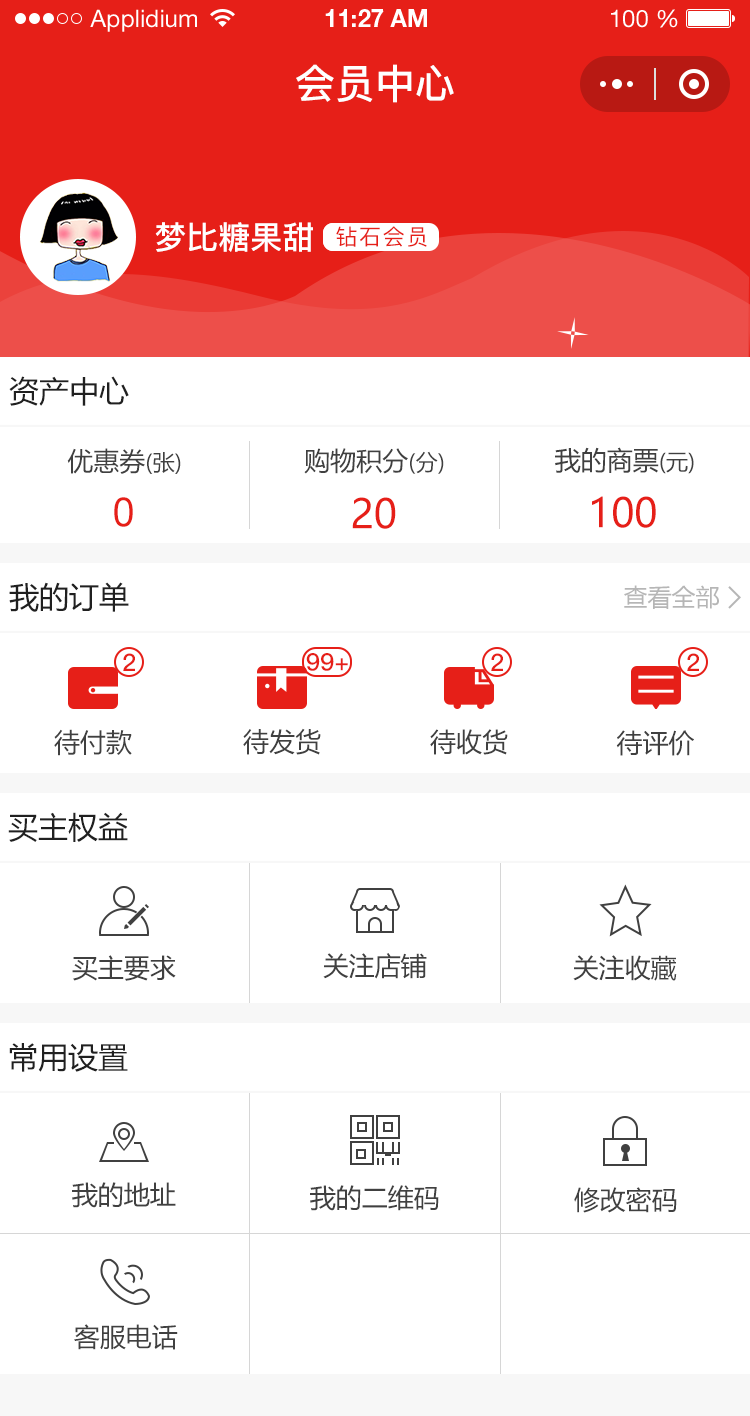
<style>
.page{position:relative;width:750px;height:1416px;background:#ffffff}
.page>*{position:absolute;margin:0}
.t1{font:24px "HelveticaNeueLTStd-Roman";color:#ffffff}
.t2{font:24px "HelveticaNeueLTStd-Bd";color:#ffffff}
.t3{font:40px "PingFang-SC-Bold";color:#ffffff;text-transform:uppercase}
.t4{font:32px "PingFang-SC-Bold";color:#ffffff;text-transform:uppercase}
.t5{font:22px "PingFang-SC-Medium";letter-spacing:0.08em;color:#e61f18}
.t6{font:30px "MicrosoftYaHei";color:#202020;text-transform:uppercase}
.t7{font:26px "MicrosoftYaHei";color:#404040;text-transform:uppercase}
.t8{font:22px "MicrosoftYaHei";color:#404040;text-transform:uppercase}
.t9{font:40px "ArialMT";color:#e61f18;text-transform:uppercase}
.t10{font:40px "MicrosoftYaHei";color:#e61f18;text-transform:uppercase}
.t11{font:24px "MicrosoftYaHei";color:#b6b6b6;text-transform:uppercase}
.t12{font:24px "PingFang-SC-Bold";color:#e61f18;text-transform:uppercase}
</style>
<div class="page">
<p class="t1" style="left:90px;top:9px;width:107px;height:23px">Applidium</p>
<p class="t2" style="left:325px;top:9px;width:102px;height:18px">11:27 AM</p>
<p class="t1" style="left:611px;top:9px;width:67px;height:19px">100 %</p>
<p class="t3" style="left:296px;top:64px;width:158px;height:39px">会员中心</p>
<p class="t4" style="left:155px;top:222px;width:158px;height:30px">梦比糖果甜</p>
<p class="t5" style="left:336px;top:226px;width:91px;height:21px">钻石会员</p>
<p class="t6" style="left:9px;top:376px;width:120px;height:30px">资产中心</p>
<p class="t7" style="left:67px;top:448px;width:114px;height:26px">优惠券<span class="t8">(张)</span></p>
<p class="t7" style="left:304px;top:448px;width:140px;height:26px">购物积分<span class="t8">(分)</span></p>
<p class="t7" style="left:555px;top:447px;width:139px;height:27px">我的商票<span class="t8">(元)</span></p>
<p class="t9" style="left:114px;top:497px;width:19px;height:30px">0</p>
<p class="t10" style="left:352px;top:497px;width:44px;height:32px">20</p>
<p class="t10" style="left:592px;top:496px;width:64px;height:32px">100</p>
<p class="t6" style="left:9px;top:582px;width:120px;height:30px">我的订单</p>
<p class="t11" style="left:624px;top:585px;width:95px;height:24px">查看全部</p>
<p class="t12" style="left:123px;top:653px;width:12px;height:18px">2</p>
<p class="t12" style="left:306px;top:653px;width:42px;height:18px">99+</p>
<p class="t12" style="left:491px;top:653px;width:12px;height:18px">2</p>
<p class="t12" style="left:687px;top:653px;width:12px;height:18px">2</p>
<p class="t7" style="left:54px;top:729px;width:78px;height:27px">待付款</p>
<p class="t7" style="left:243px;top:728px;width:78px;height:27px">待发货</p>
<p class="t7" style="left:430px;top:729px;width:78px;height:26px">待收货</p>
<p class="t7" style="left:616px;top:730px;width:78px;height:26px">待评价</p>
<p class="t6" style="left:8px;top:812px;width:120px;height:30px">买主权益</p>
<p class="t7" style="left:323px;top:953px;width:104px;height:26px">关注店铺</p>
<p class="t7" style="left:72px;top:955px;width:104px;height:26px">买主要求</p>
<p class="t7" style="left:573px;top:955px;width:104px;height:26px">关注收藏</p>
<p class="t6" style="left:9px;top:1043px;width:119px;height:29px">常用设置</p>
<p class="t7" style="left:72px;top:1182px;width:104px;height:26px">我的地址</p>
<p class="t7" style="left:310px;top:1185px;width:129px;height:26px">我的二维码</p>
<p class="t7" style="left:574px;top:1187px;width:103px;height:26px">修改密码</p>
<p class="t7" style="left:74px;top:1324px;width:104px;height:26px">客服电话</p>
</div>
